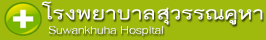
<style>
.page{position:relative;width:266px;height:40px;background:#9fba0d}
.page>*{position:absolute;margin:0}
.t1{font:25.3px "THBaijam";color:#fdfdfd;scale:1.31 1}
.t2{font:16px "THFahkwang";color:#fdfdfd}
</style>
<div class="page">
<p class="t1" style="left:41px;top:1px;width:222px;height:24px">โรงพยาบาลสุวรรณคูหา</p>
<p class="t2" style="left:49px;top:26px;width:114px;height:10px">Suwankhuha Hospital</p>
</div>
